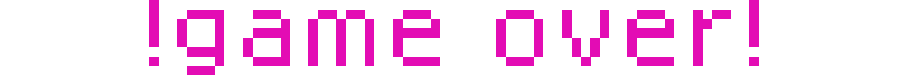
<style>
.page{position:relative;width:900px;height:77px;background:#ffffff}
.page>*{position:absolute;margin:0}
.t1{font:75px "Dogica_Pixel";color:#e30cb4}
</style>
<div class="page">
<p class="t1" style="left:149px;top:0px;width:610px;height:75px">!game over!</p>
</div>
